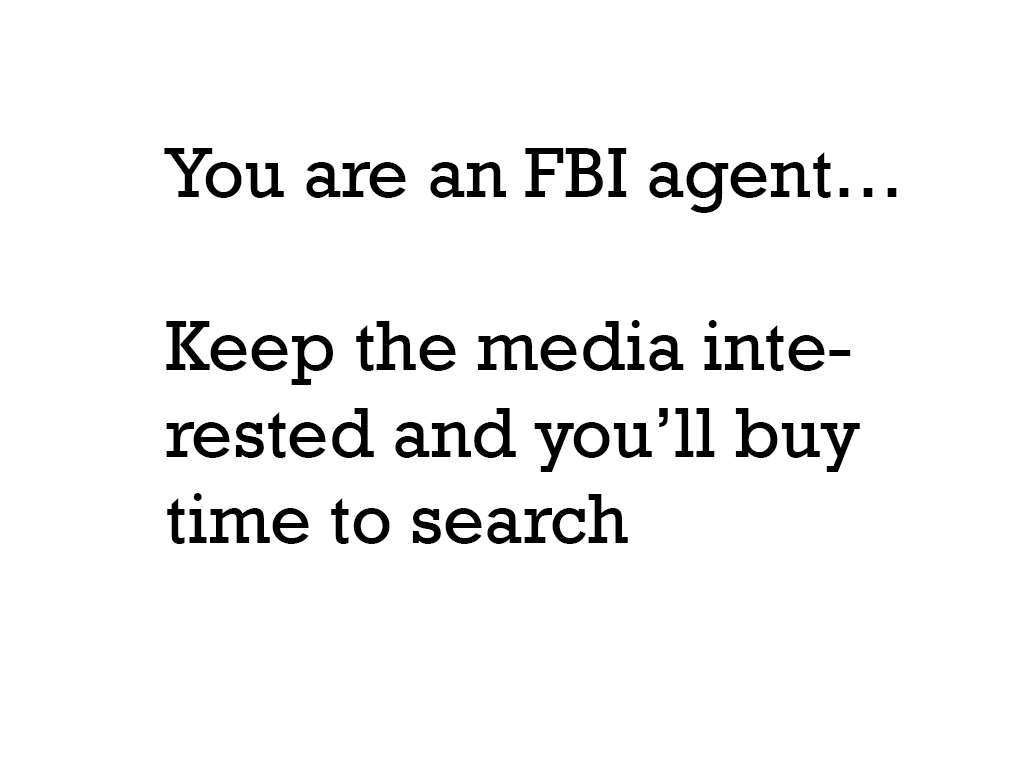
<style>
.page{position:relative;width:1024px;height:768px;background:#ffffff}
.page>*{position:absolute;margin:0}
.t1{font:72px "Rockwell";color:#000000}
</style>
<div class="page">
<p class="t1" style="left:164px;top:148px;width:733px;height:396px">You are an FBI agent…<br> <br>Keep the media interested and you’ll buy time to search</p>
</div>
